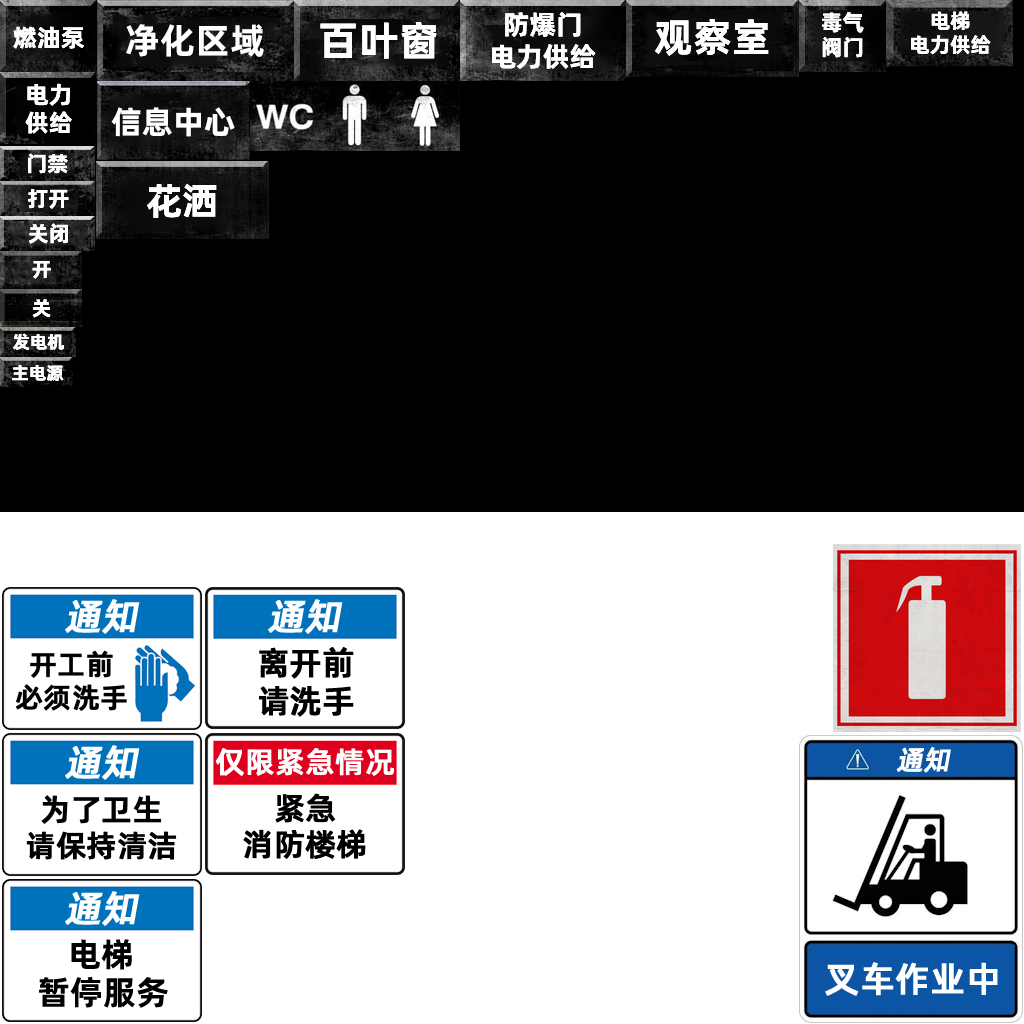
<style>
.page{position:relative;width:1024px;height:1024px;background:#000000}
.page>*{position:absolute;margin:0}
.t1{font:27.1px/31.1px "AlibabaPuHuiTiB";color:#ffffff}
.t2{font:22px/25px "AlibabaPuHuiTiB";color:#ffffff}
.t3{font:20.8px/23.6px "AlibabaPuHuiTiB";color:#ffffff}
.t4{font:24.4px "AlibabaPuHuiTiB";color:#ffffff}
.t5{font:35.6px "AlibabaPuHuiTiB";color:#ffffff}
.t6{font:41px "AlibabaPuHuiTiB";color:#ffffff}
.t7{font:39.6px "AlibabaPuHuiTiB";color:#ffffff}
.t8{font:23.9px/27.5px "AlibabaPuHuiTiB";color:#ffffff}
.t9{font:31.7px "AlibabaPuHuiTiB";color:#ffffff}
.t10{font:21.4px "AlibabaPuHuiTiB";color:#ffffff}
.t11{font:37.4px "AlibabaPuHuiTiB";color:#ffffff}
.t12{font:20px "AlibabaPuHuiTiB";color:#ffffff}
.t13{font:17.7px "AlibabaPuHuiTiB";color:#ffffff}
.t14{font:36.9px "AlibabaPuHuiTiM";color:#ffffff;font-weight:bold;font-style:italic}
.t15{font:27.8px/32.7px "AlibabaPuHuiTiM";color:#000000;font-weight:bold}
.t16{font:32.4px/38px "AlibabaPuHuiTiM";color:#000000;font-weight:bold}
.t17{font:29.5px "AlibabaPuHuiTiM";color:#ffffff;font-weight:bold}
.t18{font:27.1px "AlibabaPuHuiTiM";color:#ffffff;font-weight:bold;font-style:italic}
.t19{font:30.3px/35.6px "AlibabaPuHuiTiM";color:#000000;font-weight:bold}
.t20{font:31.1px/36.5px "AlibabaPuHuiTiM";color:#000000;font-weight:bold}
.t21{font:33.6px "AlibabaPuHuiTiB";color:#000000}
.t22{font:35px "AlibabaPuHuiTiM";color:#ffffff;font-weight:bold}
</style>
<div class="page">
<p class="t1" style="left:492px;top:12px;width:104px;height:57px;text-align:center">防爆门<br>电力供给</p>
<p class="t2" style="left:822px;top:12px;width:42px;height:46px;text-align:center">毒气<br>阀门</p>
<p class="t3" style="left:911px;top:11px;width:80px;height:44px;text-align:center">电梯<br>电力供给</p>
<p class="t4" style="left:13px;top:26px;width:71px;height:23px">燃油泵</p>
<p class="t5" style="left:126px;top:24px;width:138px;height:33px">净化区域</p>
<p class="t6" style="left:320px;top:22px;width:117px;height:37px">百叶窗</p>
<p class="t7" style="left:654px;top:19px;width:115px;height:37px">观察室</p>
<p class="t8" style="left:25px;top:83px;width:47px;height:51px">电力<br>供给</p>
<p class="t9" style="left:111px;top:107px;width:124px;height:30px">信息中心</p>
<p class="t10" style="left:28px;top:153px;width:40px;height:21px">门禁</p>
<p class="t11" style="left:147px;top:183px;width:70px;height:35px">花洒</p>
<p class="t10" style="left:28px;top:189px;width:41px;height:20px">打开</p>
<p class="t10" style="left:28px;top:223px;width:40px;height:21px">关闭</p>
<p class="t12" style="left:32px;top:261px;width:19px;height:18px">开</p>
<p class="t12" style="left:32px;top:299px;width:19px;height:19px">关</p>
<p class="t13" style="left:12px;top:333px;width:53px;height:17px">发电机</p>
<p class="t13" style="left:12px;top:365px;width:52px;height:16px">主电源</p>
<p class="t14" style="left:65px;top:599px;width:75px;height:35px">通知</p>
<p class="t14" style="left:268px;top:599px;width:75px;height:35px">通知</p>
<p class="t15" style="left:15px;top:650px;width:112px;height:61px;text-align:center">开工前<br>必须洗手</p>
<p class="t16" style="left:259px;top:647px;width:95px;height:70px;text-align:center">离开前<br>请洗手</p>
<p class="t14" style="left:65px;top:745px;width:75px;height:35px">通知</p>
<p class="t17" style="left:215px;top:747px;width:180px;height:29px">仅限紧急情况</p>
<p class="t18" style="left:896px;top:747px;width:55px;height:26px">通知</p>
<p class="t19" style="left:26px;top:795px;width:151px;height:65px;text-align:center">为了卫生<br>请保持清洁</p>
<p class="t20" style="left:243px;top:793px;width:123px;height:66px;text-align:center">紧急<br>消防楼梯</p>
<p class="t14" style="left:65px;top:891px;width:75px;height:35px">通知</p>
<p class="t21" style="left:71px;top:939px;width:61px;height:31px">电梯</p>
<p class="t22" style="left:825px;top:962px;width:173px;height:34px">叉车作业中</p>
<p class="t21" style="left:39px;top:977px;width:129px;height:31px">暂停服务</p>
</div>
